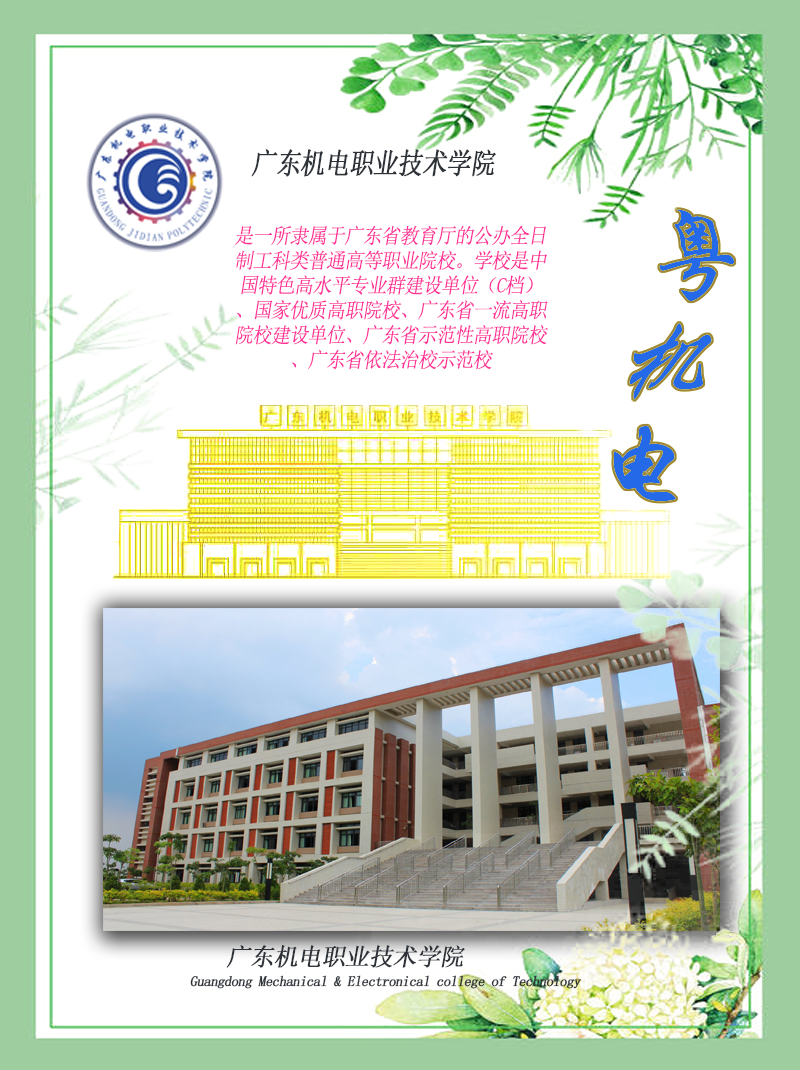
<style>
.page{position:relative;width:800px;height:1070px;background:#ffffff}
.page>*{position:absolute;margin:0}
.t1{font:29px "NSimSun";letter-spacing:-0.04em;color:#2e3239;font-weight:bold;font-style:italic;scale:0.85 1}
.t2{font:20.9px "NSimSun";letter-spacing:-0.04em;color:#ff3398;font-style:italic;scale:0.92 1}
.t3{font:24.2px "NSimSun";letter-spacing:-0.04em;color:#2e3239;font-weight:bold;font-style:italic}
.t4{font:14.1px "NSimSun";letter-spacing:-0.04em;color:#2e3239;font-weight:bold;font-style:italic}
</style>
<div class="page">
<p class="t1" style="left:251px;top:149px;width:245px;height:28px">广东机电职业技术学院</p>
<p class="t2" style="left:234px;top:225px;width:314px;height:145px;text-align:center">是一所隶属于广东省教育厅的公办全日制工科类普通高等职业院校。学校是中国特色高水平专业群建设单位（C档）、国家优质高职院校、广东省一流高职院校建设单位、广东省示范性高职院校、广东省依法治校示范校</p>
<p class="t3" style="left:226px;top:945px;width:239px;height:23px">广东机电职业技术学院</p>
<p class="t4" style="left:190px;top:975px;width:392px;height:14px">Guangdong Mechanical &amp; Electronical college of Technology</p>
</div>
